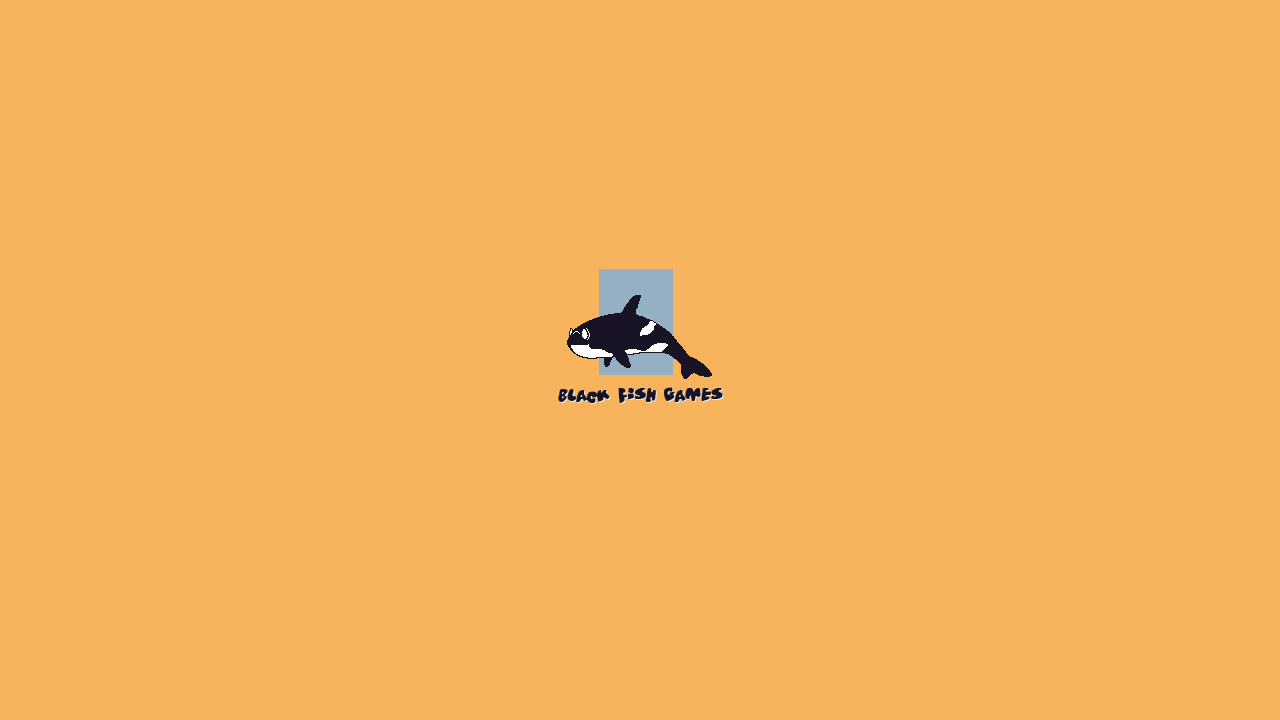
<style>
.page{position:relative;width:1280px;height:720px;background:#f8b35d}
.page>*{position:absolute;margin:0}
.t1{font:16px "Vitamin";color:#181425}
</style>
<div class="page">
<p class="t1" style="left:558px;top:387px;width:165px;height:16px">Black Fish Games</p>
</div>
